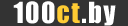
<style>
.page{position:relative;width:128px;height:26px;background:#333333}
.page>*{position:absolute;margin:0}
.t1{font:27px "Impact";letter-spacing:0.05em;color:#ffffff}
.t2{font:27px "Impact";letter-spacing:0.05em;color:#ffcc33}
</style>
<div class="page">
<p class="t1" style="left:13px;top:1px;width:103px;height:25px">100<span class="t2">ct</span>.by</p>
</div>
